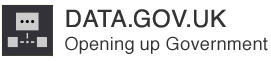
<style>
.page{position:relative;width:271px;height:61px;background:#ffffff}
.page>*{position:absolute;margin:0}
.t1{font:24px "Helvetica";letter-spacing:0.02em;color:#333333}
.t2{font:18px "Helvetica";letter-spacing:0.02em;color:#333333}
</style>
<div class="page">
<p class="t1" style="left:66px;top:9px;width:161px;height:19px">DATA.GOV.UK</p>
<p class="t2" style="left:65px;top:36px;width:203px;height:18px">Opening up Government</p>
</div>
